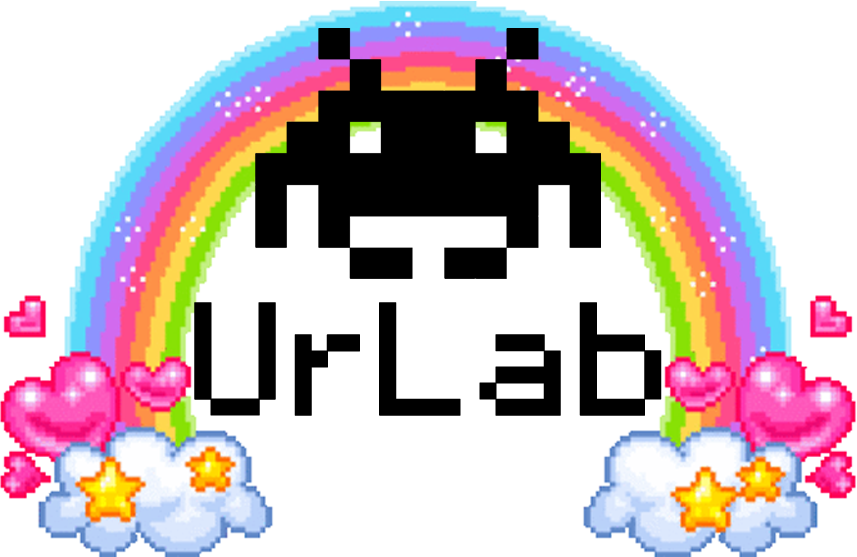
<style>
.page{position:relative;width:857px;height:557px;background:#ffffff}
.page>*{position:absolute;margin:0}
.t1{font:144.8px "VolterGoldfish";color:#000000;font-weight:bold}
</style>
<div class="page">
<p class="t1" style="left:194px;top:302px;width:468px;height:114px">UrLab</p>
</div>
